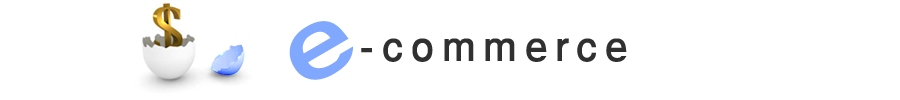
<style>
.page{position:relative;width:900px;height:100px;background:#ffffff}
.page>*{position:absolute;margin:0}
.t1{font:134.2px "Gautami";letter-spacing:0.1em;color:#80a8ff;scale:1.32 1}
.t2{font:58.3px "Gautami";letter-spacing:0.1em;color:#303030}
</style>
<div class="page">
<p class="t1" style="left:289px;top:21px;width:64px;height:59px;rotate:-30deg">e</p>
<p class="t2" style="left:361px;top:38px;width:266px;height:24px">-commerce</p>
</div>
